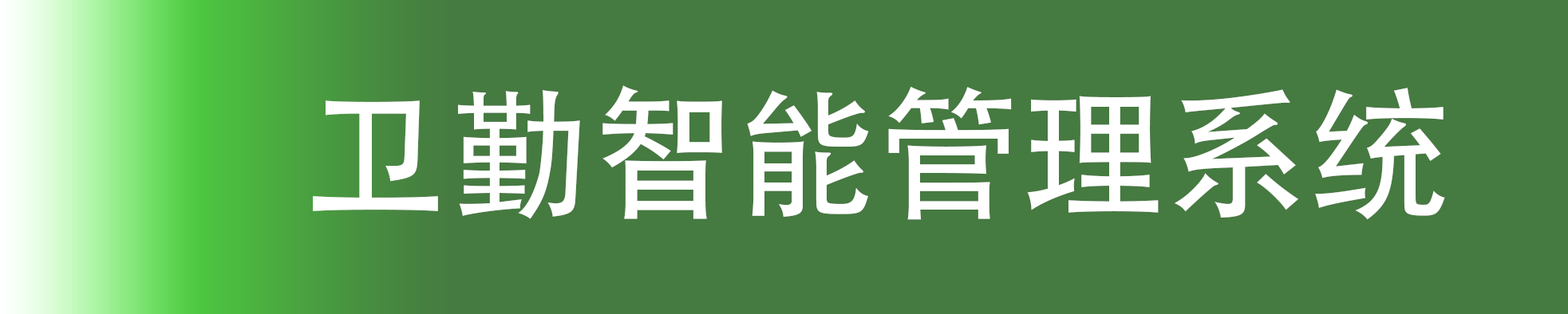
<style>
.page{position:relative;width:1568px;height:314px;background:#457a40}
.page>*{position:absolute;margin:0}
.t1{font:143.6px "AdobeHeitiStd-Regular";color:#ffffff}
</style>
<div class="page">
<p class="t1" style="left:313px;top:85px;width:1132px;height:135px">卫勤智能管理系统</p>
</div>
